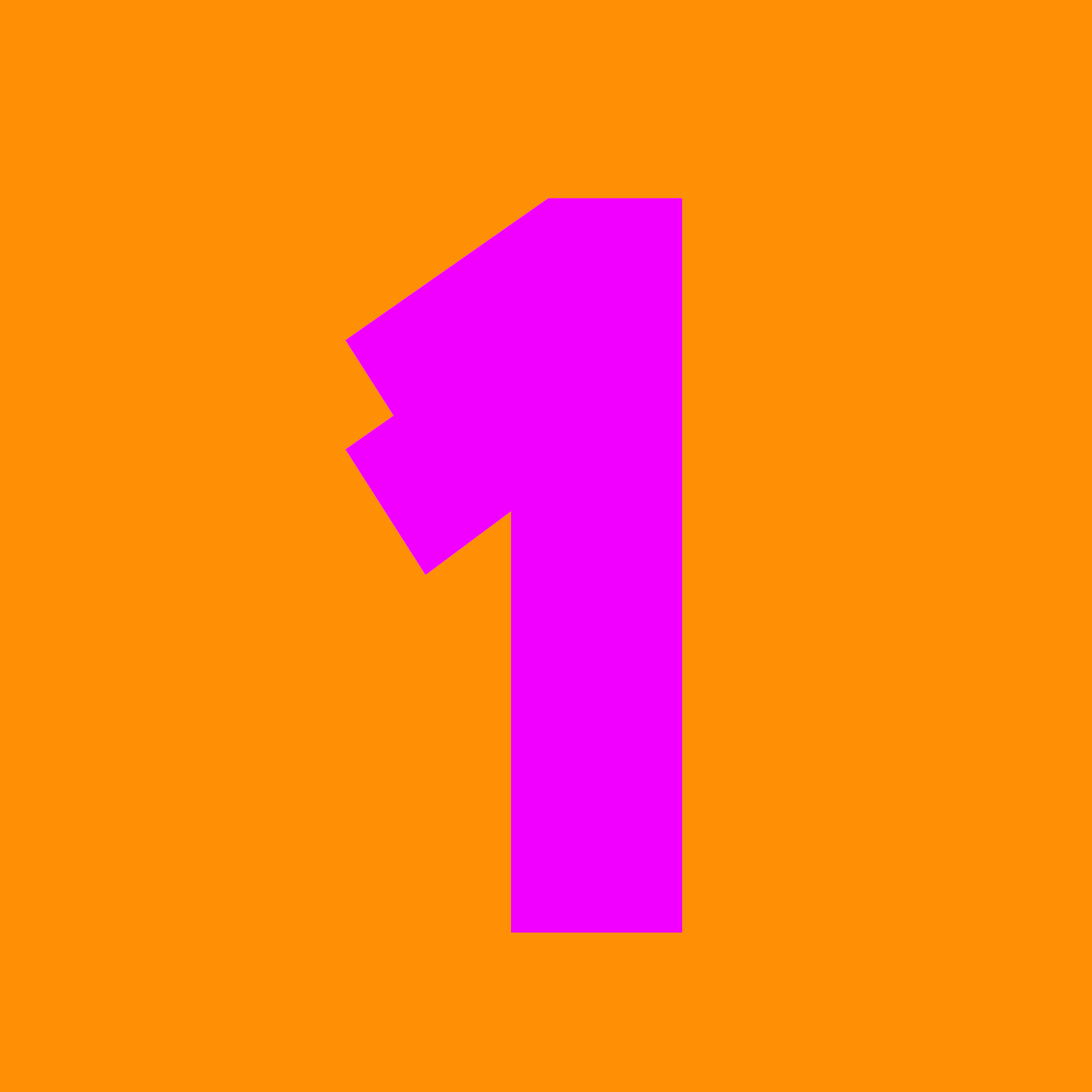
<style>
.page{position:relative;width:1092px;height:1092px;background:#ff8f05}
.page>*{position:absolute;margin:0}
.t1{font:910px "AvertaStd-Black";letter-spacing:-0.05em;color:#f200ff}
</style>
<div class="page">
<p class="t1" style="left:345px;top:198px;width:337px;height:735px">11</p>
</div>
